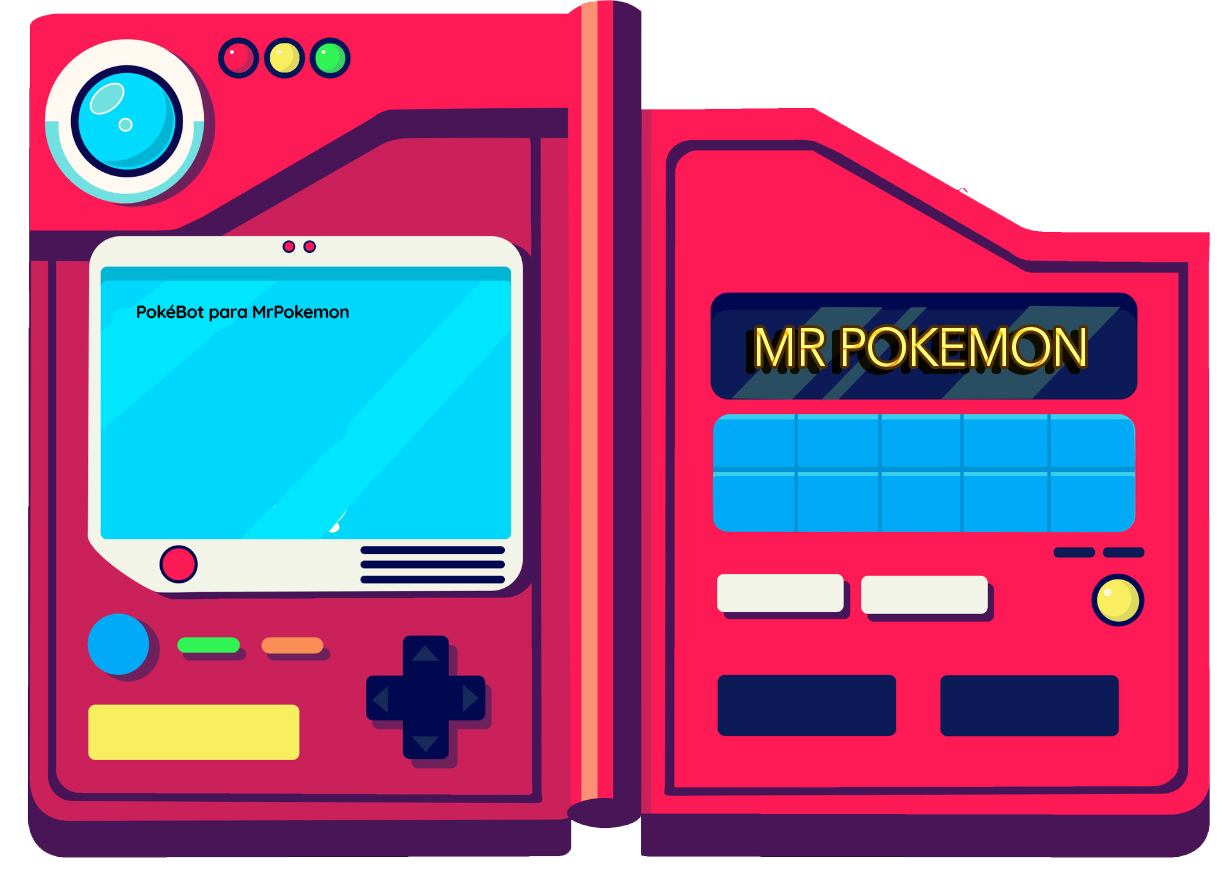
<style>
.page{position:relative;width:1230px;height:869px;background:#fe1a55}
.page>*{position:absolute;margin:0}
.t1{font:17.6px "Quicksand-Bold";letter-spacing:-0.02em;color:#000000}
.t2{font:53.8px "AvenirLTStd-Book";letter-spacing:-0.02em;color:#fffd72;scale:0.94 1}
</style>
<div class="page">
<p class="t1" style="left:137px;top:304px;width:212px;height:18px">PokéBot para MrPokemon</p>
<p class="t2" style="left:757px;top:327px;width:328px;height:40px">MR POKEMON</p>
</div>
